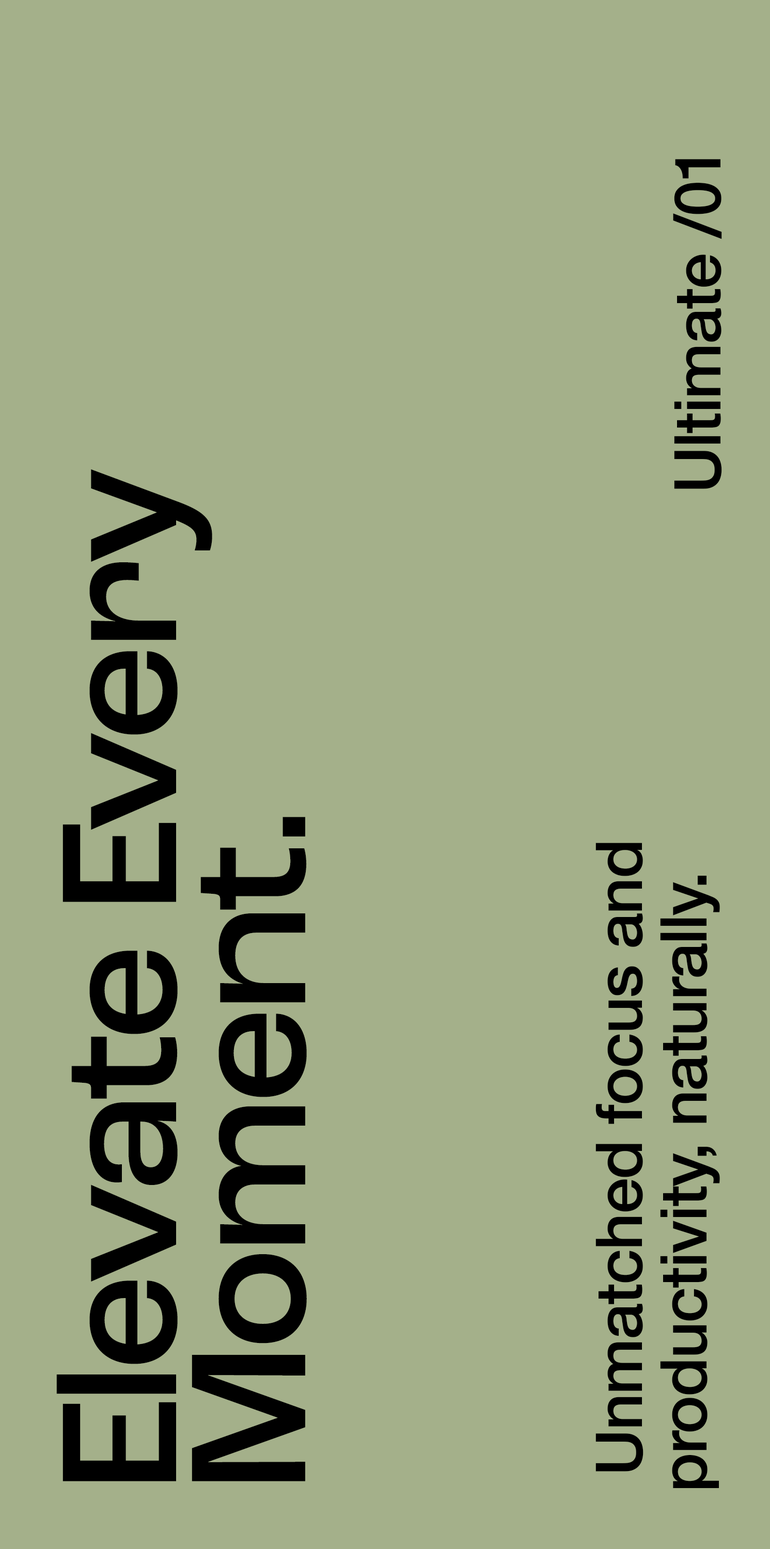
<style>
.page{position:relative;width:770px;height:1549px;background:#a4b08a}
.page>*{position:absolute;margin:0}
.t1{font:64.5px "HelveticaNeue-Medium";letter-spacing:-0.019em;color:#000000}
.t2{font:172.1px/129.1px "RocGrotesk-Medium";letter-spacing:-0.025em;color:#000000}
</style>
<div class="page">
<p class="t1" style="left:673px;top:159px;width:49px;height:330px;rotate:-90deg">Ultimate /01</p>
<p class="t2" style="left:56px;top:469px;width:251px;height:1012px;rotate:-90deg">Elevate Every <br>Moment.</p>
<p class="t1" style="left:595px;top:843px;width:125px;height:645px;rotate:-90deg">Unmatched focus and productivity, naturally.</p>
</div>
